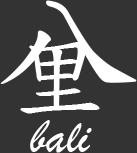
<style>
.page{position:relative;width:137px;height:153px;background:#333333}
.page>*{position:absolute;margin:0}
.t1{font:150px "DFKaiShu-SB-Estd-BF";color:#ffffff}
.t2{font:100px "DFKaiShu-SB-Estd-BF";color:#ffffff}
.t3{font:50px "BrushScriptMT";color:#ffffff}
</style>
<div class="page">
<p class="t1" style="left:0px;top:0px;width:137px;height:84px">八</p>
<p class="t2" style="left:20px;top:42px;width:80px;height:72px">里</p>
<p class="t3" style="left:30px;top:120px;width:62px;height:33px">bali</p>
</div>
